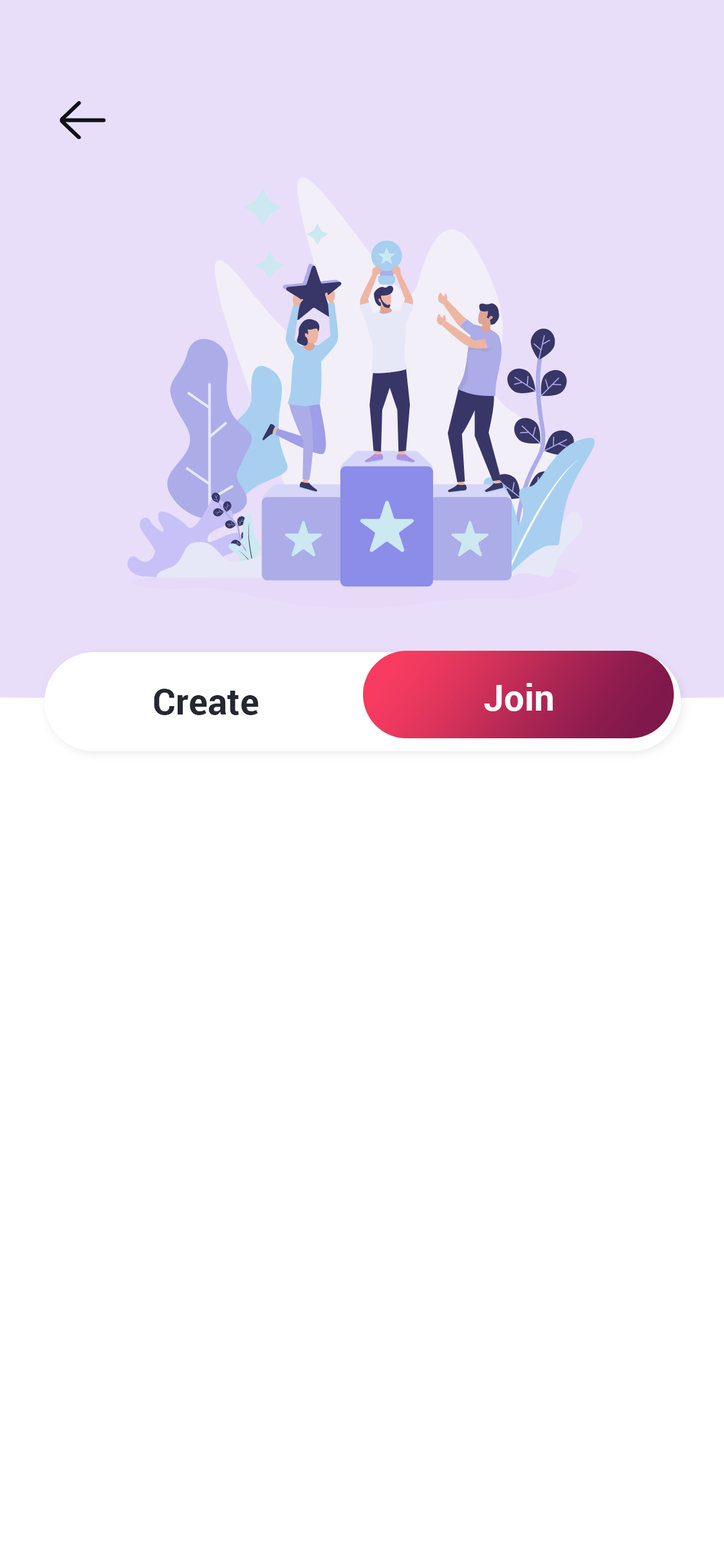
<style>
.page{position:relative;width:724px;height:1568px;background:#ffffff}
.page>*{position:absolute;margin:0}
.t1{font:36px "Roboto-Bold";letter-spacing:0.005em;color:#252832}
.t2{font:36px "Roboto-Bold";letter-spacing:0.005em;color:#ffffff}
</style>
<div class="page">
<p class="t1" style="left:154px;top:689px;width:105px;height:26px">Create</p>
<p class="t2" style="left:484px;top:683px;width:69px;height:28px">Join</p>
</div>
